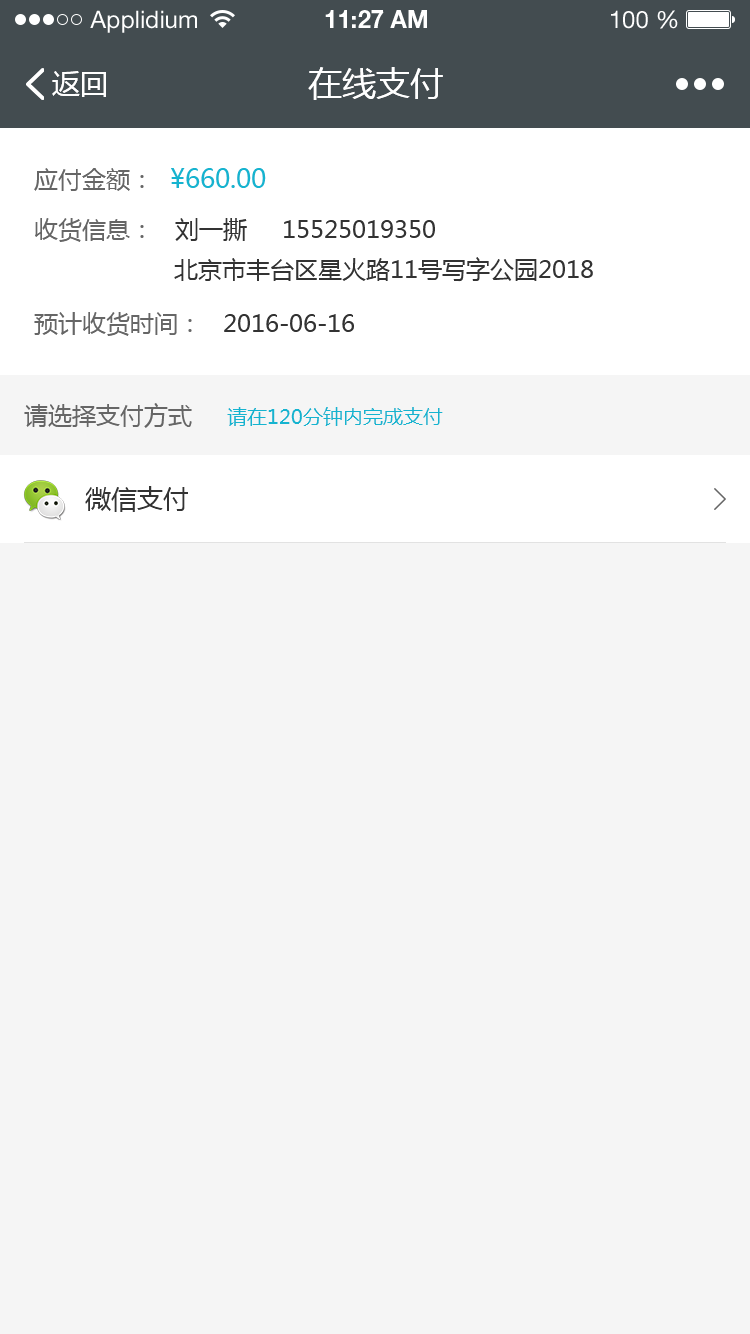
<style>
.page{position:relative;width:750px;height:1334px;background:#f5f5f5}
.page>*{position:absolute;margin:0}
.t1{font:24px "HelveticaNeueLTStd-Roman";color:#ffffff}
.t2{font:24px "HelveticaNeueLTStd-Bd";color:#ffffff}
.t3{font:28px "MicrosoftYaHei";color:#ffffff}
.t4{font:34px "MicrosoftYaHei";color:#ffffff}
.t5{font:24px/40px "MicrosoftYaHei";color:#333333}
.t6{font:24px/54px "MicrosoftYaHei";color:#666666}
.t7{font:26px/54px "MicrosoftYaHei";color:#15b4d0}
.t8{font:24px/50px "MicrosoftYaHei";color:#666666}
.t9{font:24px/54px "MicrosoftYaHei";color:#333333}
.t10{font:20px "MicrosoftYaHei";color:#15b4d0}
.t11{font:24px "MicrosoftYaHei";color:#666666}
.t12{font:26px "MicrosoftYaHei";color:#333333}
</style>
<div class="page">
<p class="t1" style="left:90px;top:10px;width:107px;height:23px">Applidium</p>
<p class="t2" style="left:325px;top:10px;width:102px;height:18px">11:27 AM</p>
<p class="t1" style="left:611px;top:10px;width:67px;height:19px">100 %</p>
<p class="t3" style="left:52px;top:71px;width:54px;height:26px">返回</p>
<p class="t4" style="left:308px;top:67px;width:135px;height:33px">在线支付</p>
<p class="t5" style="left:34px;top:168px;width:559px;height:168px"><span class="t6">应付金额：  </span><span class="t7">¥660.00<br></span><span class="t8">收货信息：   </span>刘一撕     15525019350<br>                    北京市丰台区星火路11号写字公园2018<br><span class="t6">预计收货时间：   </span><span class="t9">2016-06-16</span></p>
<p class="t10" style="left:24px;top:403px;width:419px;height:25px"><span class="t11">请选择支付方式     </span>请在120分钟内完成支付</p>
<p class="t12" style="left:85px;top:486px;width:103px;height:26px">微信支付</p>
</div>
